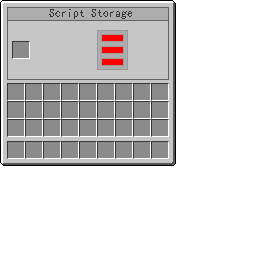
<style>
.page{position:relative;width:256px;height:256px;background:#ffffff}
.page>*{position:absolute;margin:0}
.t1{font:12px "¿¬Ìå";color:#373737}
</style>
<div class="page">
<p class="t1" style="left:49px;top:9px;width:83px;height:10px">Script Storage</p>
</div>
